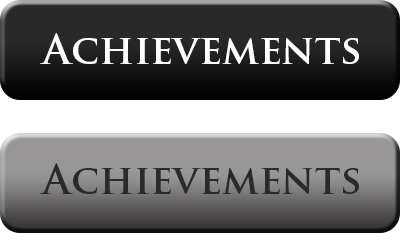
<style>
.page{position:relative;width:400px;height:233px}
.page>*{position:absolute;margin:0}
.t1{font:40px "TrajanPro-Bold";color:#ffffff}
.t2{font:40px "TrajanPro-Bold";color:#2b2a2a}
</style>
<div class="page">
<p class="t1" style="left:40px;top:33px;width:319px;height:31px">Achievements</p>
<p class="t2" style="left:40px;top:163px;width:319px;height:31px">Achievements</p>
</div>
